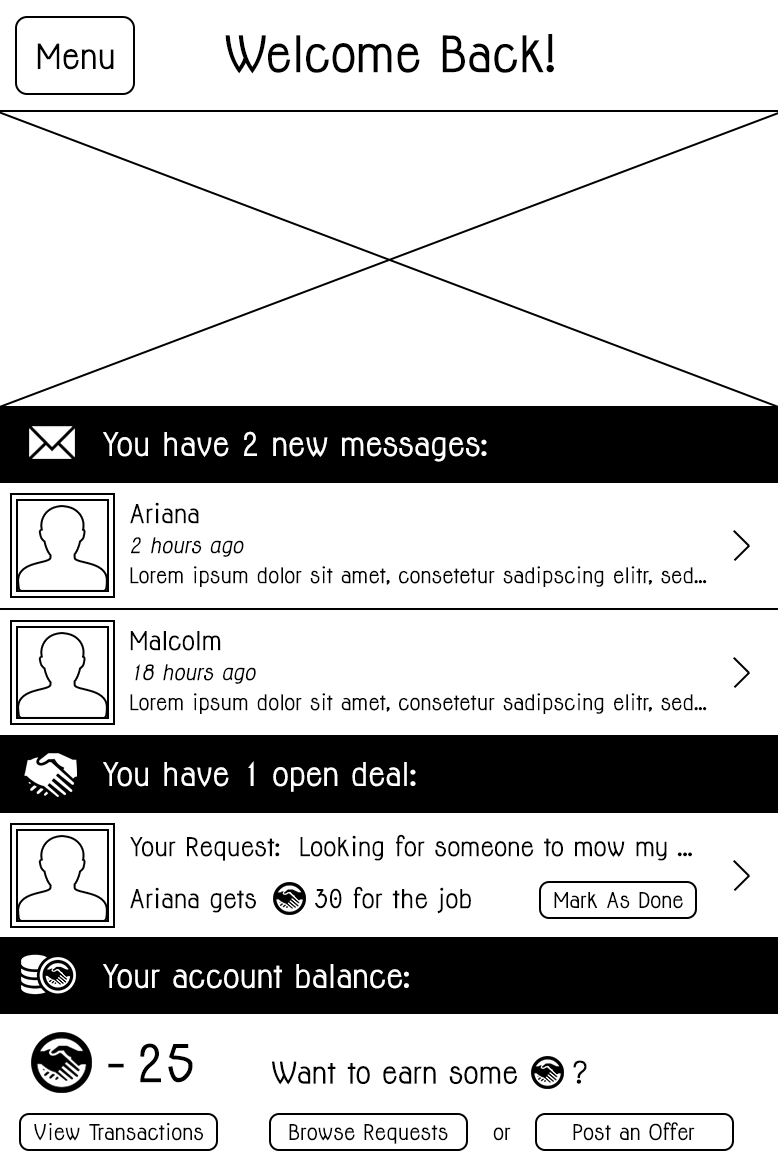
<style>
.page{position:relative;width:778px;height:1167px;background:#ffffff}
.page>*{position:absolute;margin:0}
.t1{font:46.2px "Jolly-Bold";color:#000000}
.t2{font:32px "Jolly-Bold";color:#000000}
.t3{font:30px "Jolly-Bold";color:#ffffff}
.t4{font:20px/30px "Jolly-Bold";color:#000000}
.t5{font:24px/30px "Jolly-Bold";color:#000000}
.t6{font:20px/30px "Jolly-BoldItalic";color:#000000}
.t7{font:24px/52px "Jolly-Bold";color:#000000}
.t8{font:20px "Jolly-Bold";color:#000000}
.t9{font:48px "Jolly-Bold";color:#000000}
.t10{font:28px "Jolly-Bold";color:#000000}
</style>
<div class="page">
<p class="t1" style="left:225px;top:34px;width:329px;height:40px">Welcome Back!</p>
<p class="t2" style="left:37px;top:43px;width:77px;height:27px">Menu</p>
<p class="t3" style="left:103px;top:431px;width:384px;height:31px">You have 2 new messages:</p>
<p class="t4" style="left:130px;top:502px;width:577px;height:85px"><span class="t5">Ariana<br></span><span class="t6">2 hours ago<br></span>Lorem ipsum dolor sit amet, consetetur sadipscing elitr, sed... <span class="t6">diam nonumy eirmod tempor</span></p>
<p class="t4" style="left:130px;top:631px;width:577px;height:83px"><span class="t5">Malcolm<br></span><span class="t6">18 hours ago<br></span>Lorem ipsum dolor sit amet, consetetur sadipscing elitr, sed... <span class="t6">diam nonumy eirmod tempor</span></p>
<p class="t3" style="left:103px;top:761px;width:313px;height:31px">You have 1 open deal:</p>
<p class="t7" style="left:130px;top:834px;width:562px;height:80px">Your Request:  Looking for someone to mow my ...<br>Ariana gets      30 for the job</p>
<p class="t8" style="left:554px;top:892px;width:129px;height:17px">Mark As Done</p>
<p class="t3" style="left:103px;top:964px;width:306px;height:25px">Your account balance:</p>
<p class="t9" style="left:108px;top:1043px;width:85px;height:40px">- 25</p>
<p class="t10" style="left:272px;top:1060px;width:315px;height:25px">Want to earn some     ?</p>
<p class="t8" style="left:34px;top:1123px;width:169px;height:18px">View Transactions</p>
<p class="t8" style="left:289px;top:1124px;width:159px;height:20px">Browse Requests</p>
<p class="t8" style="left:493px;top:1127px;width:18px;height:14px">or</p>
<p class="t8" style="left:573px;top:1122px;width:122px;height:19px">Post an Offer</p>
</div>
